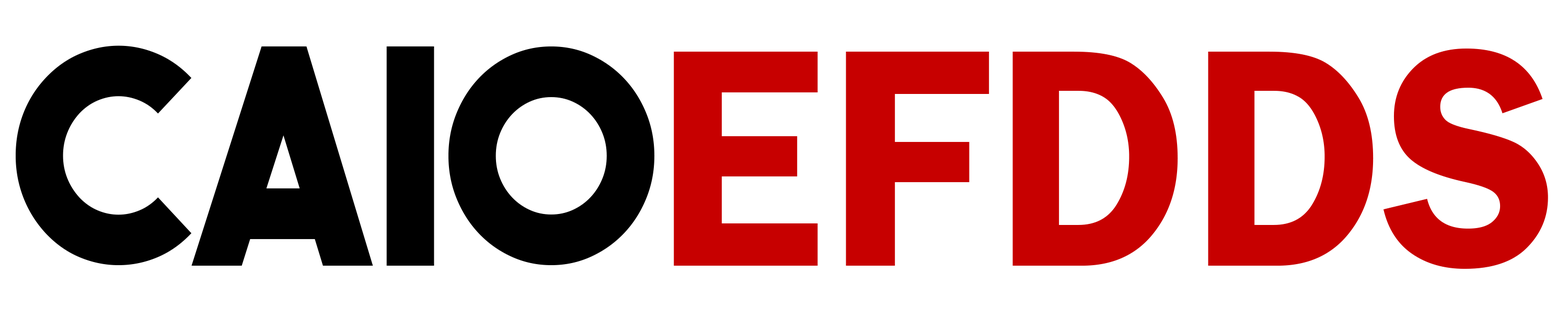
<style>
.page{position:relative;width:1568px;height:321px;background:#ffffff}
.page>*{position:absolute;margin:0}
.t1{font:321.4px "FranklinGothic-Demi";color:#c70000;scale:0.94 1}
.t2{font:298.8px "TheBoldFont";color:#000000;scale:0.94 1}
</style>
<div class="page">
<p class="t1" style="left:16px;top:45px;width:1532px;height:224px"><span class="t2">CAIO</span>EFDDS</p>
</div>
